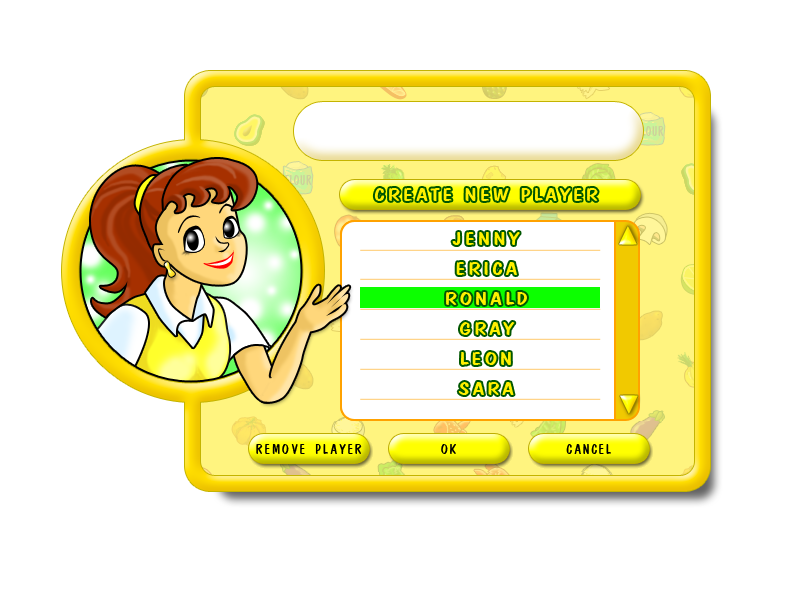
<style>
.page{position:relative;width:800px;height:600px;background:#ffffff}
.page>*{position:absolute;margin:0}
.t1{font:19.2px "DomCasualBT-Regular";letter-spacing:0.095em;color:#fff000;scale:1.32 1}
.t2{font:19.2px/30px "DomCasualBT-Regular";letter-spacing:0.095em;color:#fff000;scale:1.32 1}
</style>
<div class="page">
<p class="t1" style="left:374px;top:188px;width:224px;height:13px">CREATE NEW PLAYER</p>
<p class="t2" style="left:446px;top:232px;width:81px;height:163px;text-align:center">JENNY<br>ERICA<br>RONALD<br>GRAY<br>LEON<br>SARA</p>
</div>
